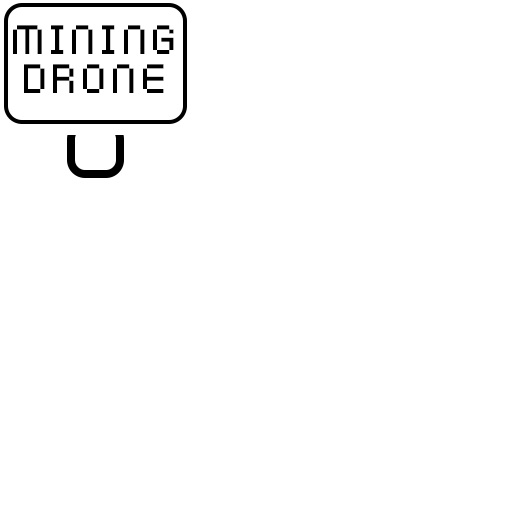
<style>
.page{position:relative;width:512px;height:512px;background:#ffffff}
.page>*{position:absolute;margin:0}
.t1{font:32.7px "KenPixel";letter-spacing:0.159em;color:#000000}
</style>
<div class="page">
<p class="t1" style="left:13px;top:25px;width:161px;height:68px;text-align:center">Mining<br>Drone</p>
</div>
